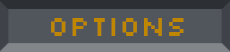
<style>
.page{position:relative;width:230px;height:52px;background:#51565c}
.page>*{position:absolute;margin:0}
.t1{font:30px "Silkscreen";color:#bf8700}
</style>
<div class="page">
<p class="t1" style="left:51px;top:18px;width:133px;height:18px">OPTIONS</p>
</div>
